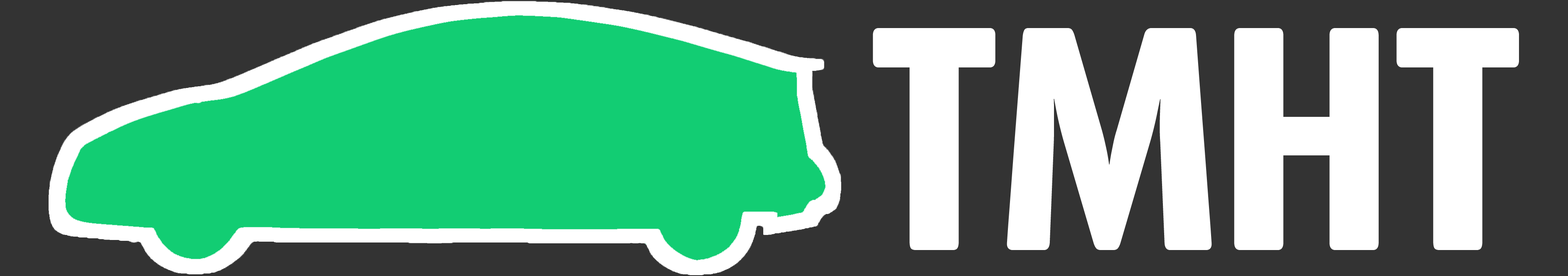
<style>
.page{position:relative;width:1568px;height:276px;background:#333333}
.page>*{position:absolute;margin:0}
.t1{font:314.1px "Sari-ExtraBold";color:#ffffff;scale:0.8 1}
</style>
<div class="page">
<p class="t1" style="left:873px;top:28px;width:646px;height:222px">TMHT</p>
</div>
